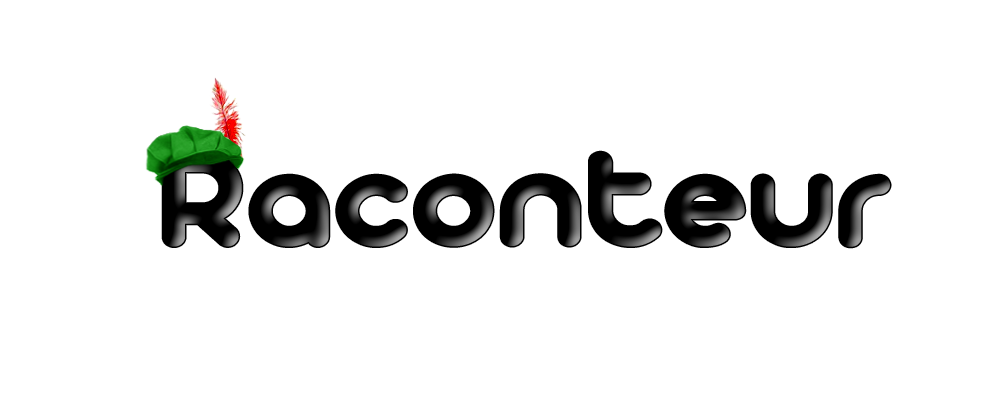
<style>
.page{position:relative;width:1000px;height:400px;background:#ffffff}
.page>*{position:absolute;margin:0}
.t1{font:147px "Arista2.0";color:#000000;scale:1.1 1}
</style>
<div class="page">
<p class="t1" style="left:163px;top:152px;width:727px;height:95px">Raconteur</p>
</div>
